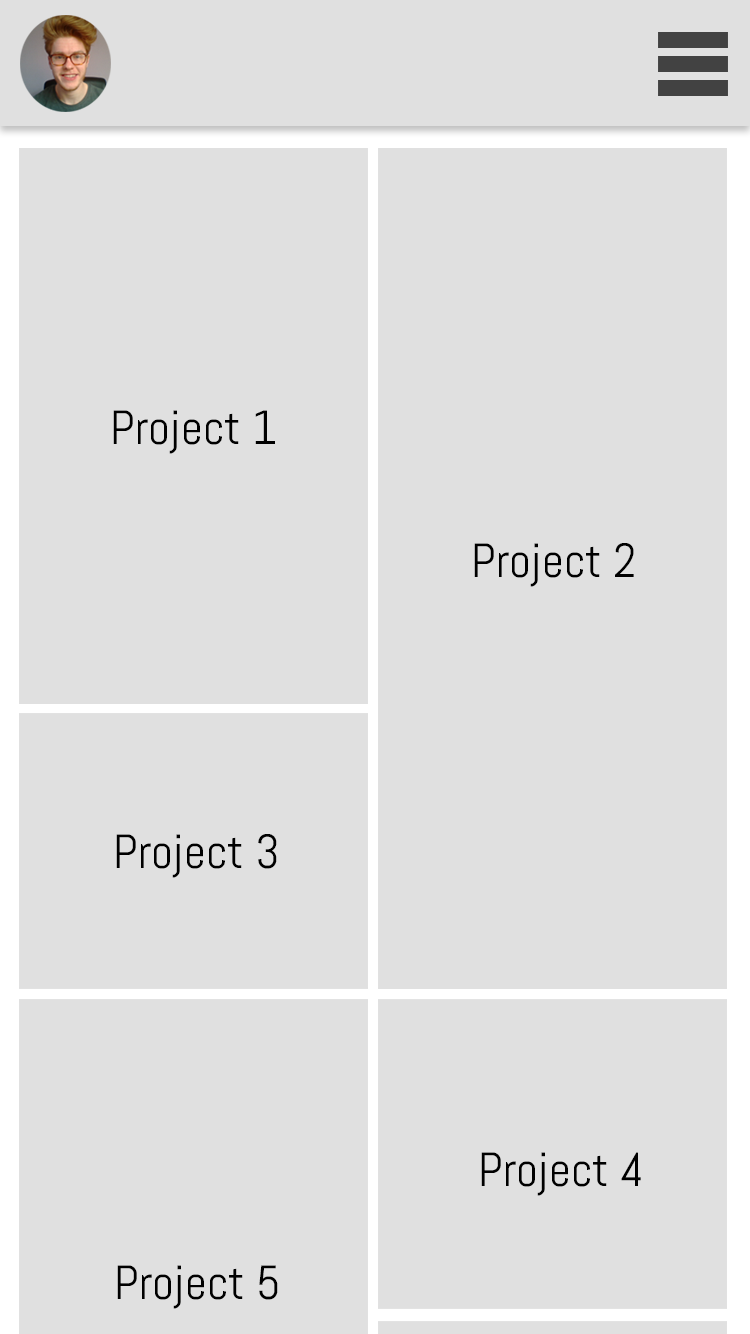
<style>
.page{position:relative;width:750px;height:1334px;background:#e0e0e0}
.page>*{position:absolute;margin:0}
.t1{font:48px "Abel-Regular";color:#000000}
</style>
<div class="page">
<p class="t1" style="left:113px;top:410px;width:162px;height:44px">Project 1</p>
<p class="t1" style="left:474px;top:543px;width:160px;height:44px">Project 2</p>
<p class="t1" style="left:116px;top:834px;width:161px;height:44px">Project 3</p>
<p class="t1" style="left:481px;top:1152px;width:160px;height:44px">Project 4</p>
<p class="t1" style="left:117px;top:1265px;width:161px;height:44px">Project 5</p>
</div>
